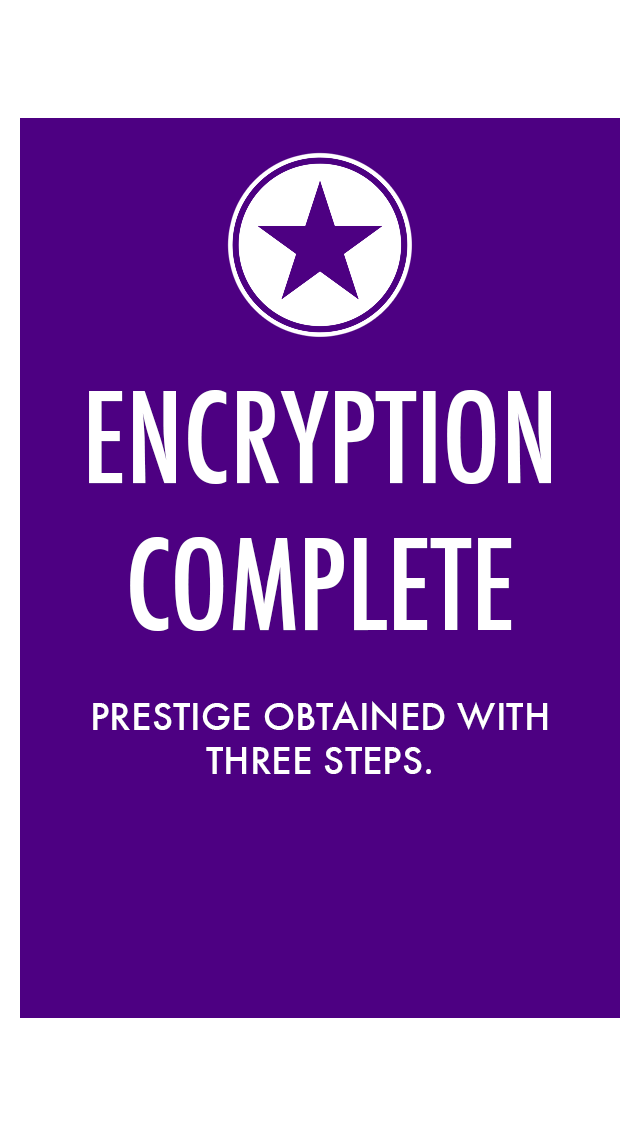
<style>
.page{position:relative;width:640px;height:1136px;background:#4d0082}
.page>*{position:absolute;margin:0}
.t1{font:36px "Futura-Medium";color:#ffffff}
.t2{font:122px "Futura-CondensedMedium";color:#ffffff}
</style>
<div class="page">
<p class="t1" style="left:89px;top:390px;width:462px;height:384px;text-align:center"><span class="t2">ENCRYPTION<br>COMPLETE<br><br></span>PRESTIGE OBTAINED WITH<br>THREE STEPS.</p>
</div>
